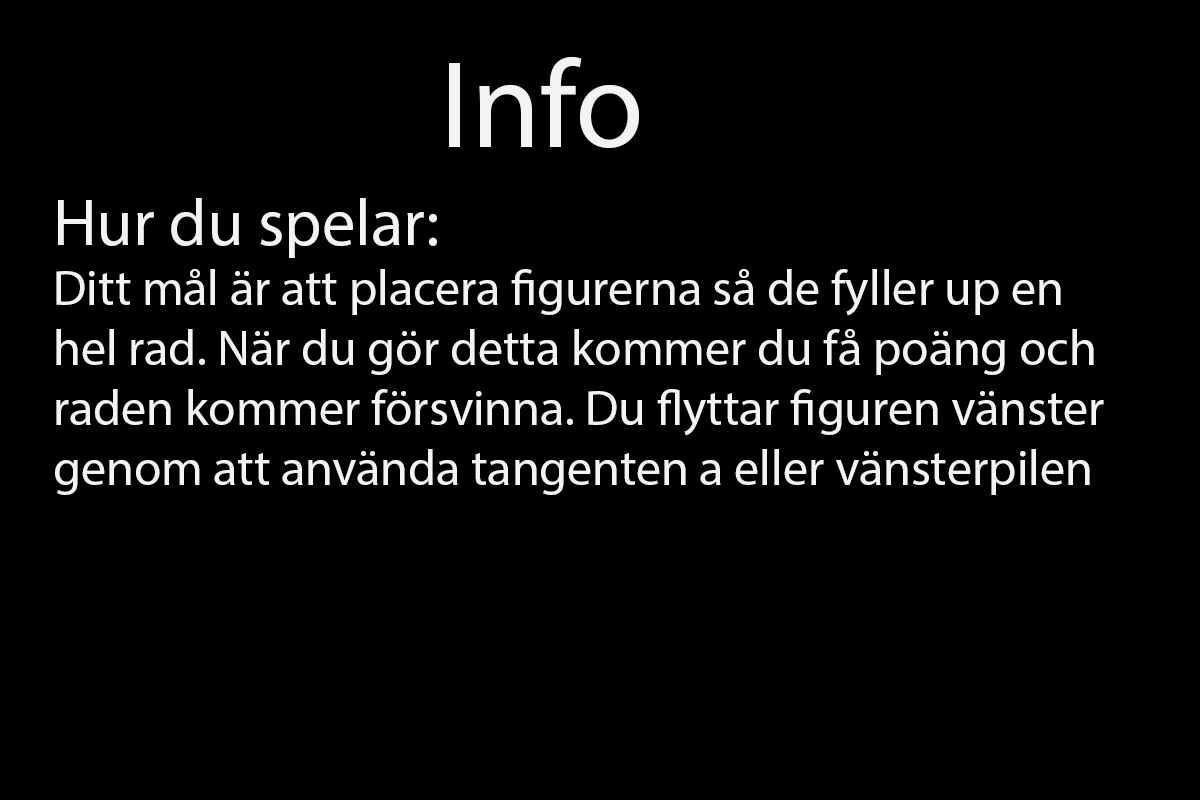
<style>
.page{position:relative;width:1200px;height:800px;background:#000000}
.page>*{position:absolute;margin:0}
.t1{font:125px "MyriadPro-Regular";color:#f4f2f2}
.t2{font:50px "MyriadPro-Regular";color:#f4f2f2}
.t3{font:66.7px "MyriadPro-Regular";color:#f4f2f2}
</style>
<div class="page">
<p class="t1" style="left:449px;top:56px;width:190px;height:92px">Info</p>
<p class="t2" style="left:55px;top:198px;width:1049px;height:297px"><span class="t3">Hur du spelar:<br></span>Ditt mål är att placera figurerna så de fyller up en<br>hel rad. När du gör detta kommer du få poäng och <br>raden kommer försvinna. Du flyttar figuren vänster <br>genom att använda tangenten a eller vänsterpilen</p>
</div>
